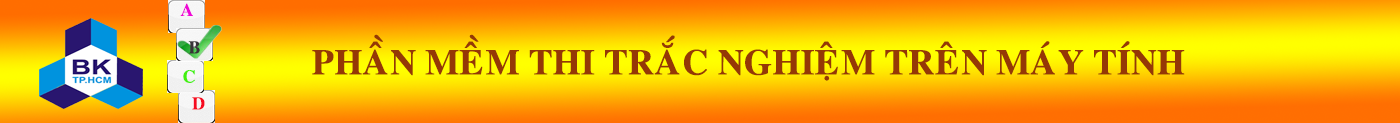
<style>
.page{position:relative;width:1400px;height:123px}
.page>*{position:absolute;margin:0}
.t1{font:18px "VNI-Times-Bold";color:#ef07d6}
.t2{font:18px "VNI-Times-Bold";color:#383438}
.t3{font:36px "VNI-Times-Bold";color:#953806}
.t4{font:18px "VNI-Times-Bold";color:#43f00e}
.t5{font:18px "VNI-Times-Bold";color:#f60a20}
</style>
<div class="page">
<p class="t1" style="left:180px;top:3px;width:13px;height:13px">A</p>
<p class="t2" style="left:188px;top:41px;width:12px;height:13px">B</p>
<p class="t3" style="left:312px;top:34px;width:873px;height:47px">PHAÀN MEÀM THI TRAÉC NGHIEÄM TREÂN MAÙY TÍNH</p>
<p class="t4" style="left:183px;top:70px;width:12px;height:13px">C</p>
<p class="t5" style="left:192px;top:97px;width:13px;height:13px">D</p>
</div>
